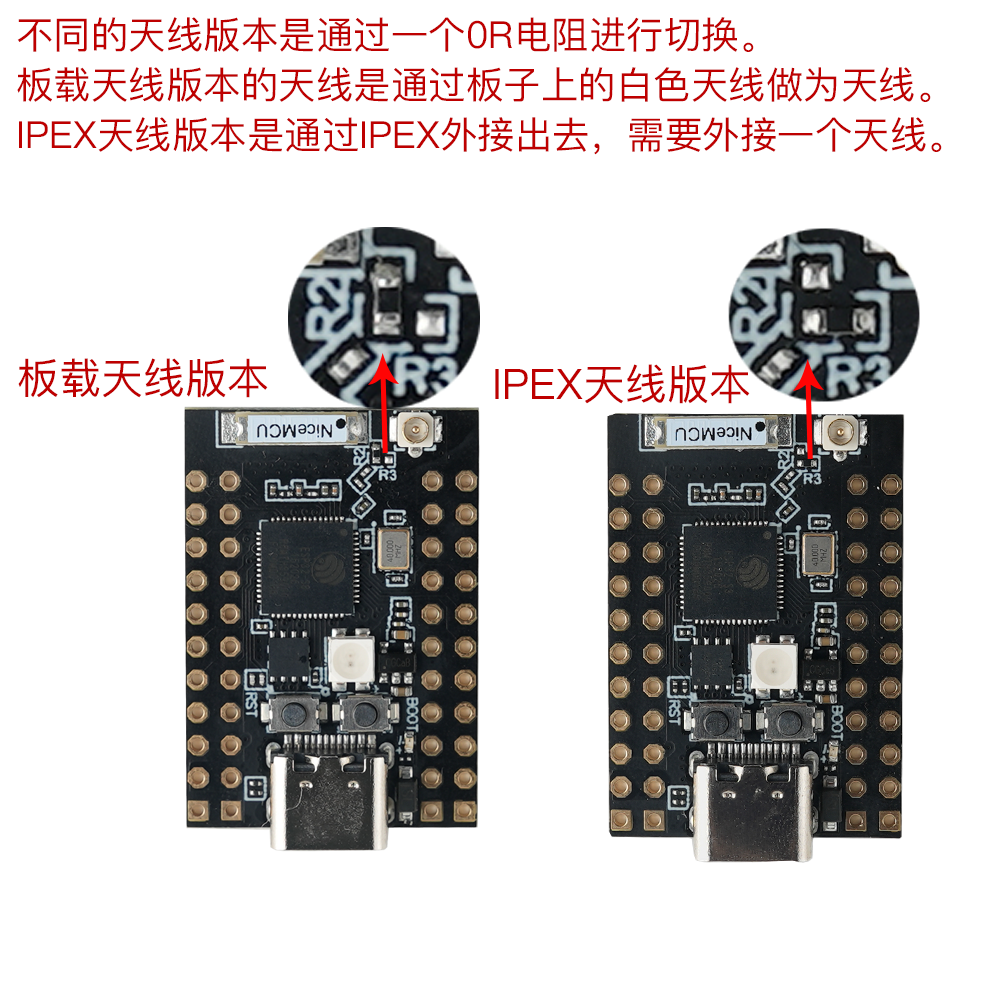
<style>
.page{position:relative;width:1001px;height:1001px;background:#ffffff}
.page>*{position:absolute;margin:0}
.t1{font:37.5px/50px "PingFang-SC-Medium";color:#be0000}
.t2{font:42.1px "PingFang-SC-Medium";color:#be0000}
</style>
<div class="page">
<p class="t1" style="left:17px;top:17px;width:925px;height:138px">不同的天线版本是通过一个0R电阻进行切换。<br>板载天线版本的天线是通过板子上的白色天线做为天线。<br>IPEX天线版本是通过IPEX外接出去，需要外接一个天线。</p>
<p class="t2" style="left:18px;top:358px;width:250px;height:40px">板载天线版本</p>
<p class="t2" style="left:495px;top:364px;width:255px;height:40px">IPEX天线版本</p>
</div>
